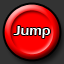
<style>
.page{position:relative;width:64px;height:64px;background:#333333}
.page>*{position:absolute;margin:0}
.t1{font:14px "ErasITC-Demi";color:#ffffff}
</style>
<div class="page">
<p class="t1" style="left:13px;top:26px;width:37px;height:12px">Jump</p>
</div>
